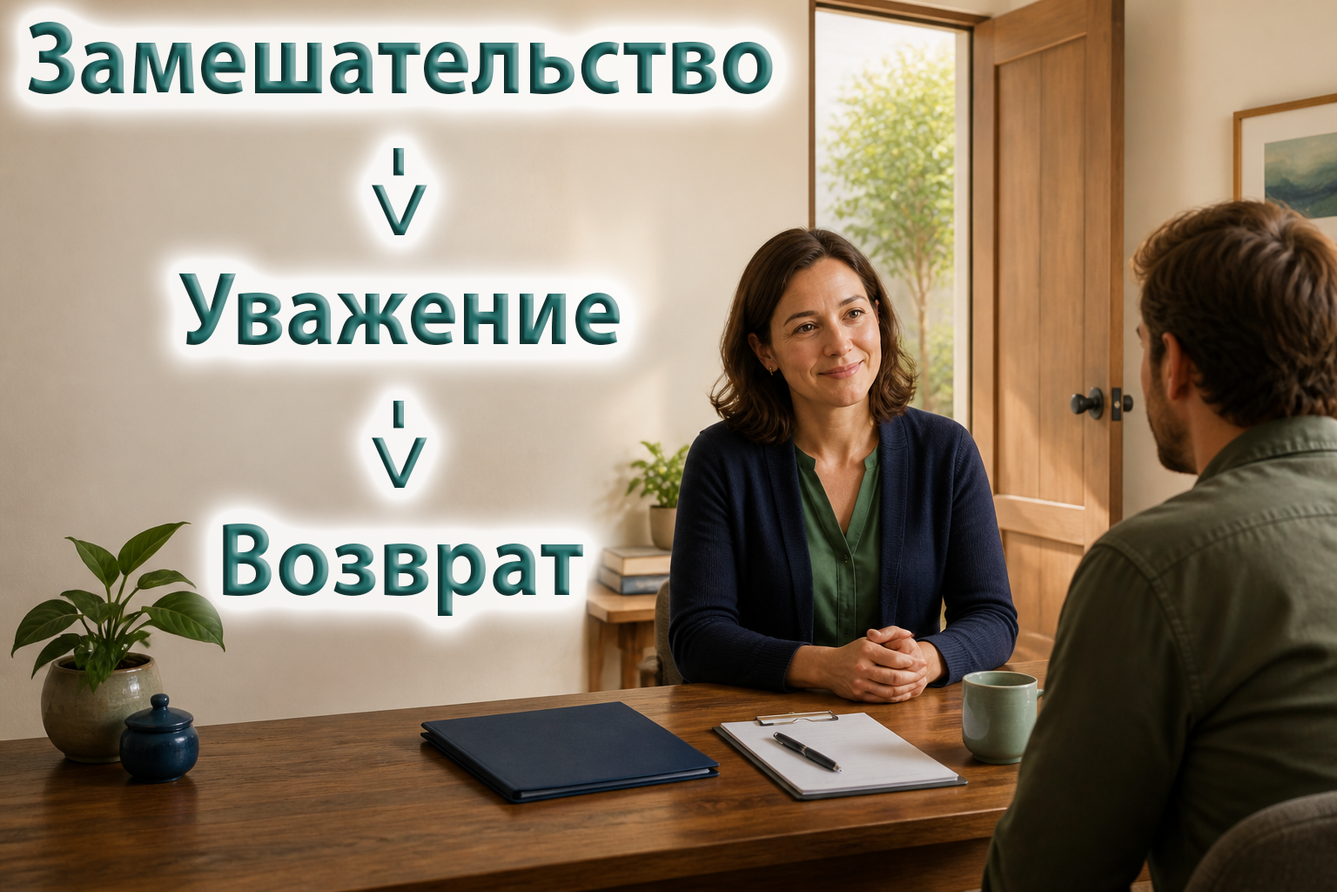
<style>
.page{position:relative;width:1337px;height:892px}
.page>*{position:absolute;margin:0}
.t1{font:104.5px "MyriadPro-Bold";scale:0.92 1}
.t2{font:104.5px "MyriadPro-Bold"}
</style>
<div class="page">
<p class="t1" style="left:28px;top:22px;width:745px;height:594px;text-align:center">Замешательство<br><br>Уважение<br><br>Возврат</p>
<p class="t2" style="left:372px;top:148px;width:56px;height:87px;rotate:90deg">-&gt;</p>
<p class="t2" style="left:372px;top:401px;width:56px;height:87px;rotate:90deg">-&gt;</p>
</div>
